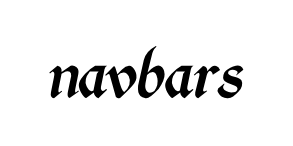
<style>
.page{position:relative;width:293px;height:146px;background:#ffffff}
.page>*{position:absolute;margin:0}
.t1{font:73.4px "Kingthings-Calligraphica-Italic";color:#000000}
</style>
<div class="page">
<p class="t1" style="left:49px;top:45px;width:195px;height:55px">navbars</p>
</div>
